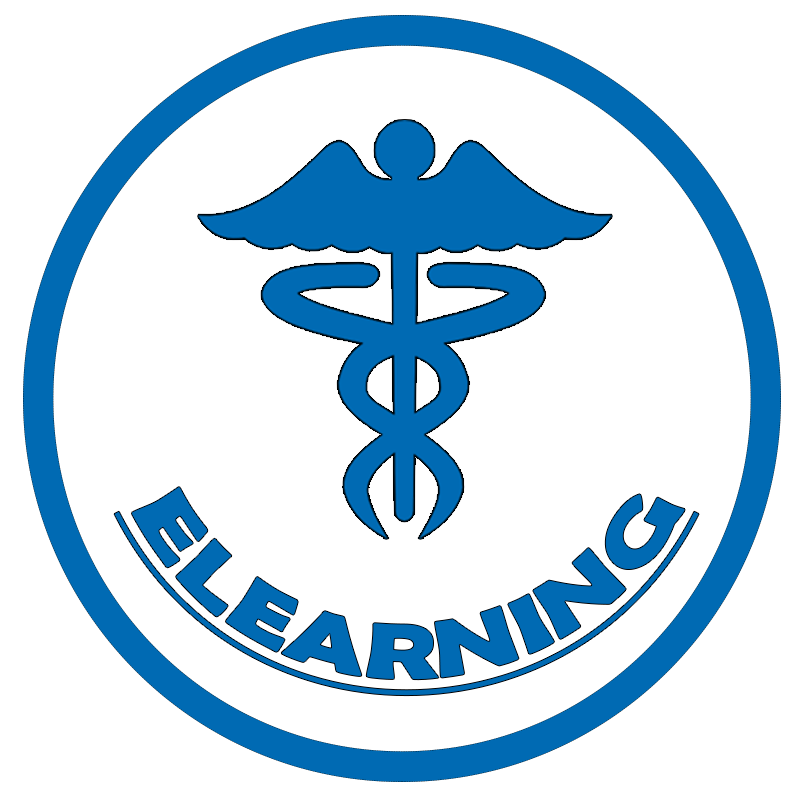
<style>
.page{position:relative;width:800px;height:800px;background:#ffffff}
.page>*{position:absolute;margin:0}
.t1{font:80.3px "BerlinSansFBDemi-Bold";color:#006ab3;text-decoration:underline}
</style>
<div class="page">
<p class="t1" style="left:114px;top:487px;width:585px;height:209px;text-align:center">ELEARNING</p>
</div>
